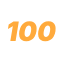
<style>
.page{position:relative;width:64px;height:64px;background:#ffffff}
.page>*{position:absolute;margin:0}
.t1{font:26.7px "Inter-BlackItalic";color:#ffaa3c}
</style>
<div class="page">
<p class="t1" style="left:8px;top:21px;width:48px;height:21px">100</p>
</div>
